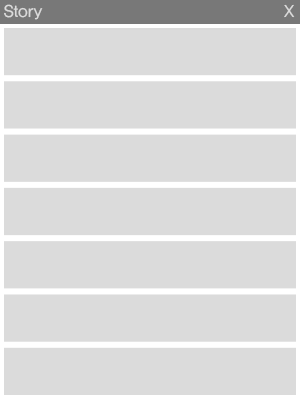
<style>
.page{position:relative;width:300px;height:400px;background:#dbdbdb}
.page>*{position:absolute;margin:0}
.t1{font:12px "YDIYGO330";letter-spacing:0.01em;color:#dbdbdb}
</style>
<div class="page">
<p class="t1" style="left:4px;top:4px;width:39px;height:16px">Story</p>
<p class="t1" style="left:284px;top:4px;width:11px;height:14px">X</p>
</div>
